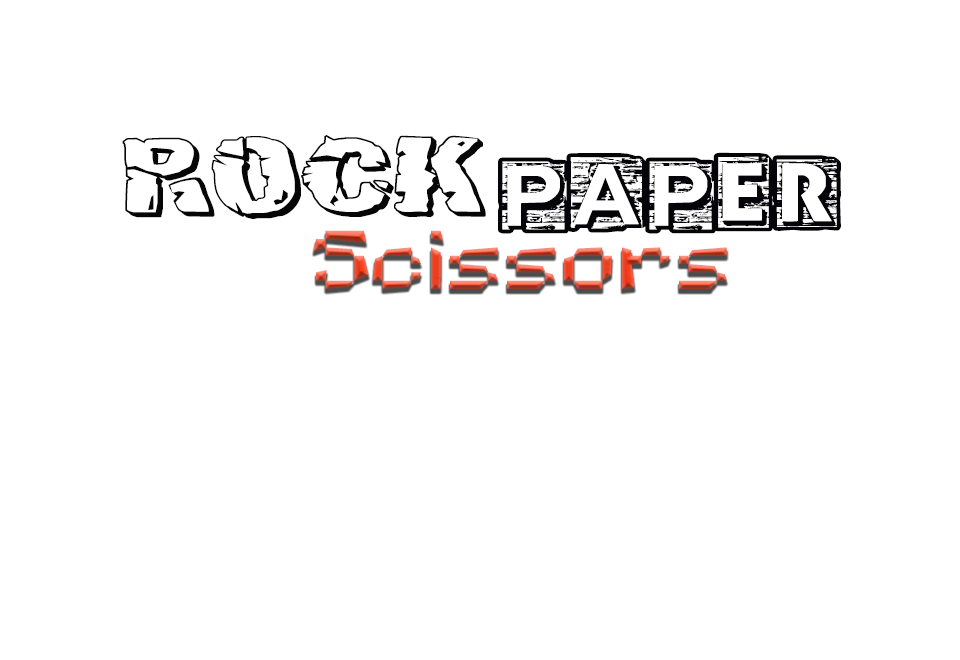
<style>
.page{position:relative;width:960px;height:660px;background:#ffffff}
.page>*{position:absolute;margin:0}
.t1{font:108.3px "Hulkbusters-3D";color:#070607;scale:1.15 1}
.t2{font:95.8px "CFCherokee-Regular";color:#050509;scale:1.15 1}
.t3{font:66.7px "MCPEfont";scale:1.15 1}
</style>
<div class="page">
<p class="t1" style="left:122px;top:135px;width:364px;height:84px">rock</p>
<p class="t2" style="left:498px;top:152px;width:343px;height:82px">PAPER</p>
<p class="t3" style="left:313px;top:230px;width:414px;height:59px">Scissors</p>
</div>
